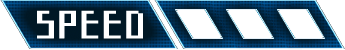
<style>
.page{position:relative;width:345px;height:50px;background:#ffffff}
.page>*{position:absolute;margin:0}
.t1{font:36.2px "Starcadia";color:#ffffff;font-weight:bold;scale:0.95 1}
</style>
<div class="page">
<p class="t1" style="left:37px;top:10px;width:106px;height:29px">SPEED</p>
</div>
